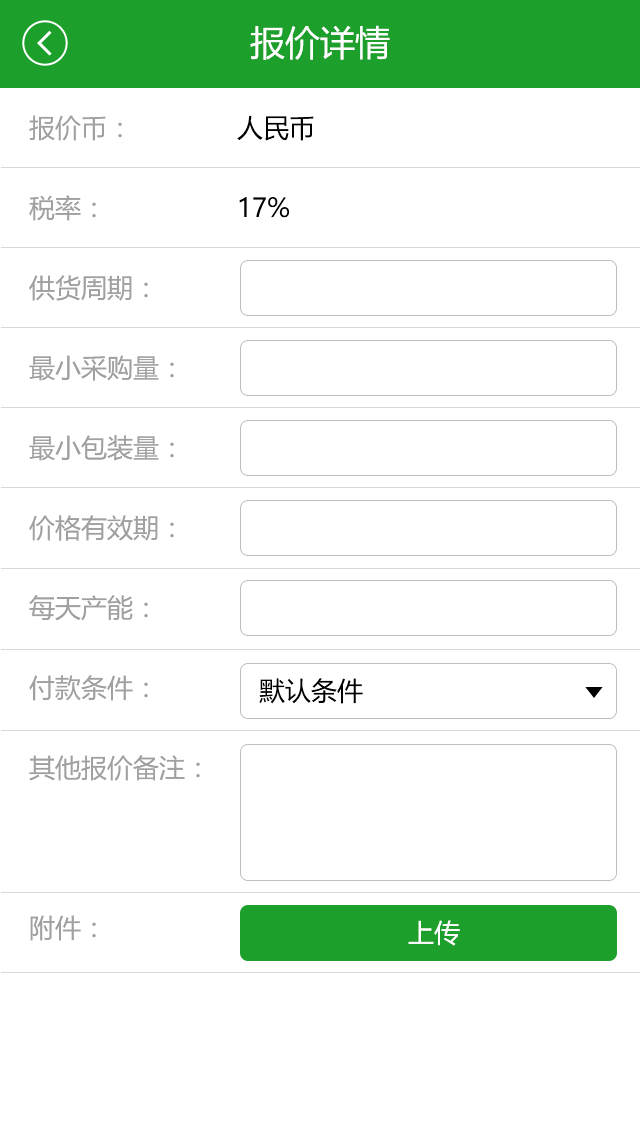
<style>
.page{position:relative;width:640px;height:1136px;background:#ffffff}
.page>*{position:absolute;margin:0}
.t1{font:35px "MicrosoftYaHei";color:#ffffff}
.t2{font:26px/80px "MicrosoftYaHei";color:#a0a0a0}
.t3{font:26px/80px "MicrosoftYaHei";color:#000000}
.t4{font:26px "MicrosoftYaHei";color:#000000}
.t5{font:26px "MicrosoftYaHei";color:#ffffff}
</style>
<div class="page">
<p class="t1" style="left:250px;top:25px;width:140px;height:35px">报价详情</p>
<p class="t2" style="left:29px;top:115px;width:171px;height:826px">报价币：<br>税率：<br>供货周期：<br>最小采购量：<br>最小包装量：<br>价格有效期：<br>每天产能：<br>付款条件：<br>其他报价备注：<br><br>附件：</p>
<p class="t3" style="left:237px;top:115px;width:77px;height:103px">人民币<br>17%</p>
<p class="t4" style="left:259px;top:678px;width:104px;height:26px">默认条件</p>
<p class="t5" style="left:408px;top:920px;width:52px;height:26px">上传</p>
</div>
